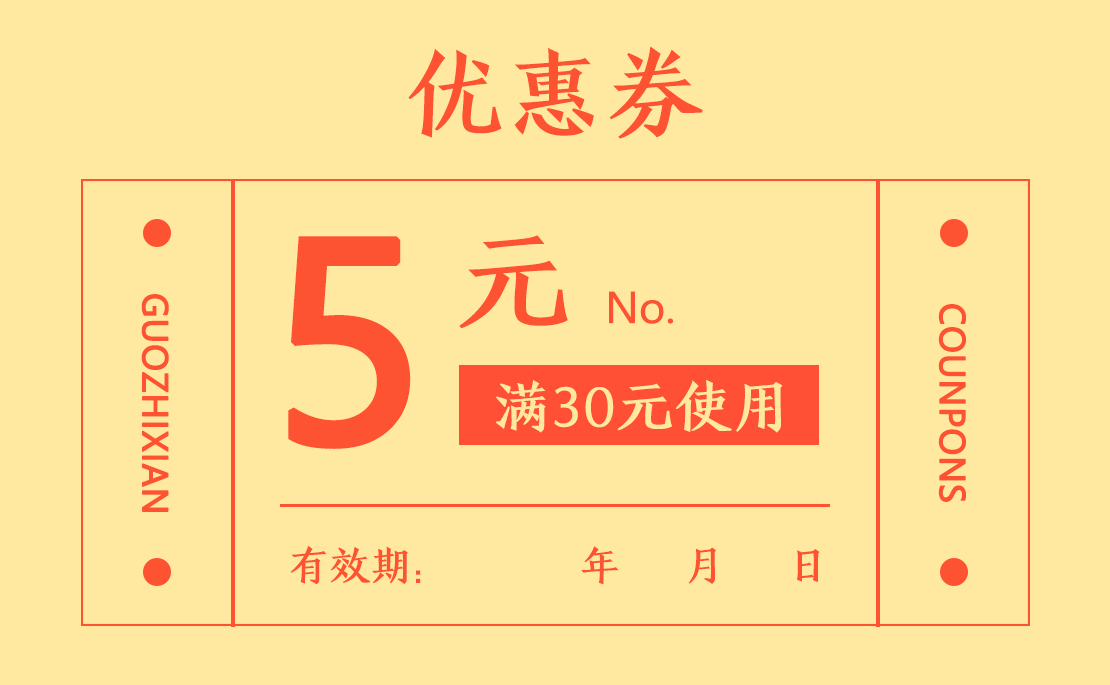
<style>
.page{position:relative;width:1110px;height:685px;background:#ffe9a0}
.page>*{position:absolute;margin:0}
.t1{font:100px "HYJinKaiJ";color:#fd5332}
.t2{font:266.7px "MicrosoftYaHei";color:#fd5332;font-weight:bold}
.t3{font:116.7px "HYJinKaiJ";color:#fd5332}
.t4{font:33.3px "MicrosoftYaHei";color:#fd5332;font-weight:bold}
.t5{font:41.7px "MicrosoftYaHei";color:#fd5332}
.t6{font:58.3px "HYJinKaiJ";color:#ffe9a0}
.t7{font:41.7px "HYJinKaiJ";color:#fd5332}
</style>
<div class="page">
<p class="t1" style="left:408px;top:46px;width:295px;height:93px">优惠券</p>
<p class="t2" style="left:288px;top:236px;width:123px;height:213px">5</p>
<p class="t3" style="left:459px;top:235px;width:109px;height:94px">元</p>
<p class="t4" style="left:141px;top:294px;width:28px;height:218px;rotate:90deg">GUOZHIXIAN</p>
<p class="t5" style="left:609px;top:291px;width:65px;height:33px">No.</p>
<p class="t4" style="left:938px;top:304px;width:28px;height:198px;rotate:90deg">COUNPONS</p>
<p class="t6" style="left:496px;top:380px;width:287px;height:53px">满30元使用</p>
<p class="t7" style="left:290px;top:546px;width:530px;height:39px">有效期：      年   月   日</p>
</div>
